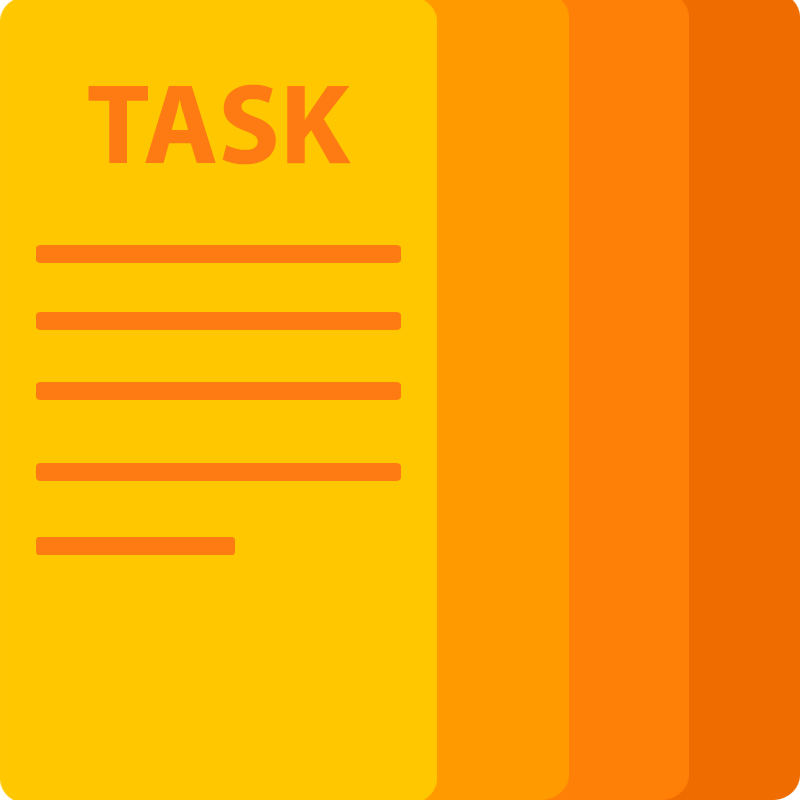
<style>
.page{position:relative;width:800px;height:800px;background:#ffc700}
.page>*{position:absolute;margin:0}
.t1{font:150px "TFPhethai";color:#fe7a12}
</style>
<div class="page">
<p class="t1" style="left:88px;top:84px;width:263px;height:81px">TASK</p>
</div>
